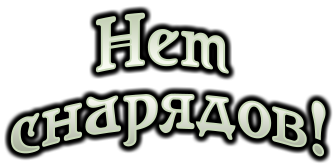
<style>
.page{position:relative;width:333px;height:167px;background:#ffffff}
.page>*{position:absolute;margin:0}
.t1{font:75px "Casanova";color:#d3dec6}
.t2{font:75px "Casanova"}
</style>
<div class="page">
<p class="t1" style="left:95px;top:12px;width:134px;height:62px">Нет</p>
<p class="t2" style="left:10px;top:93px;width:316px;height:64px">снарядов!</p>
</div>
